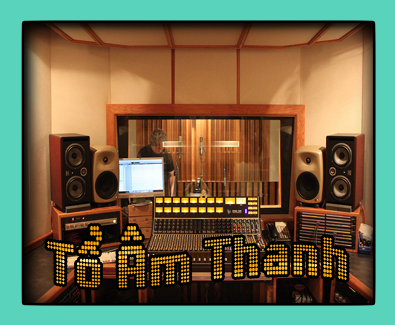
<style>
.page{position:relative;width:395px;height:325px;background:#5ad3bd}
.page>*{position:absolute;margin:0}
.t1{font:60px "HP-Yard-Regular";color:#ffaf19;scale:0.8 1}
</style>
<div class="page">
<p class="t1" style="left:47px;top:226px;width:300px;height:62px">Toå AÂm Thanh</p>
</div>
